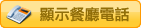
<style>
.page{position:relative;width:141px;height:28px;background:#ffe495}
.page>*{position:absolute;margin:0}
.t1{font:15px "LiGothicMed";color:#916e09}
</style>
<div class="page">
<p class="t1" style="left:40px;top:7px;width:89px;height:15px">顯示餐廳電話</p>
</div>
